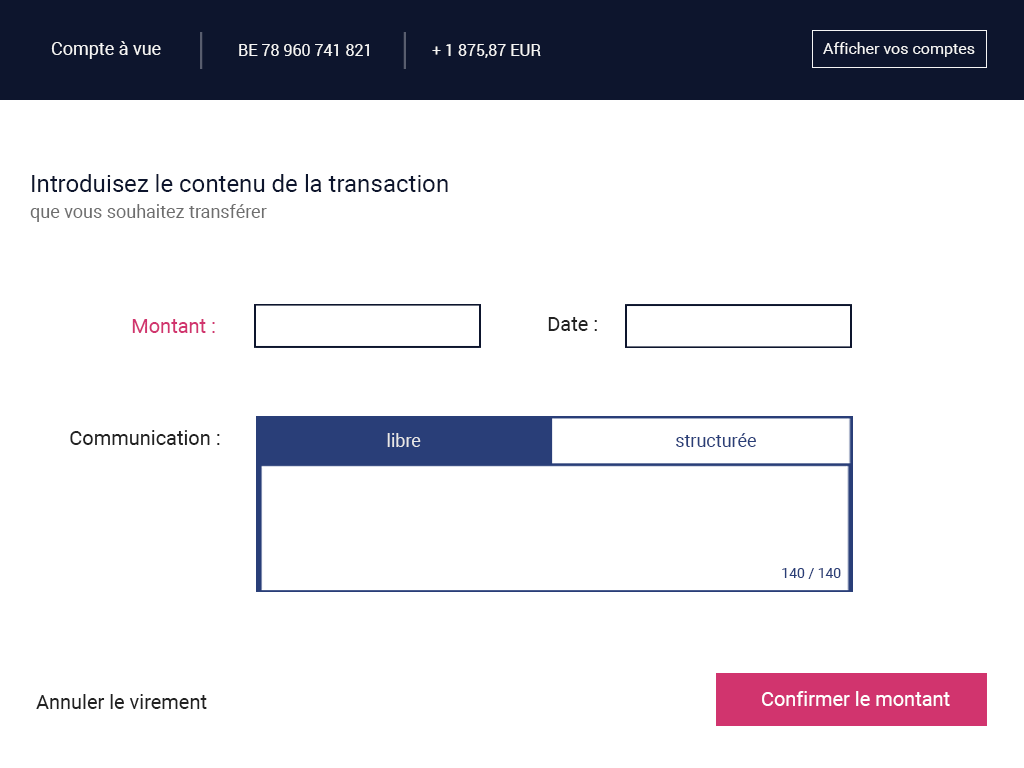
<style>
.page{position:relative;width:1024px;height:768px;background:#ffffff}
.page>*{position:absolute;margin:0}
.t1{font:18px "Roboto-Regular";color:#f5f5f5}
.t2{font:16px "Roboto-Regular";color:#f5f5f5}
.t3{font:24px "Roboto-Regular";color:#0d152d}
.t4{font:18px "Roboto-Regular";color:#6e6e6e}
.t5{font:20px "Roboto-Regular";color:#222222}
.t6{font:20px "Roboto-Regular";color:#d1346e}
.t7{font:18px "Roboto-Regular";color:#e8e8e8}
.t8{font:18px "Roboto-Regular";color:#293e78}
.t9{font:14px "Roboto-Regular";color:#293e78}
.t10{font:20px "Roboto-Regular";color:#ffffff}
</style>
<div class="page">
<p class="t1" style="left:51px;top:41px;width:110px;height:18px">Compte à vue</p>
<p class="t2" style="left:239px;top:44px;width:130px;height:12px">BE 78 960 741 821</p>
<p class="t2" style="left:432px;top:44px;width:109px;height:14px">+ 1 875,87 EUR</p>
<p class="t2" style="left:823px;top:42px;width:152px;height:15px">Afficher vos comptes</p>
<p class="t3" style="left:32px;top:174px;width:416px;height:18px">Introduisez le contenu de la transaction</p>
<p class="t4" style="left:30px;top:204px;width:237px;height:18px">que vous souhaitez transférer</p>
<p class="t5" style="left:548px;top:317px;width:49px;height:14px">Date :</p>
<p class="t6" style="left:132px;top:319px;width:83px;height:14px">Montant :</p>
<p class="t5" style="left:70px;top:430px;width:150px;height:15px">Communication :</p>
<p class="t7" style="left:387px;top:433px;width:34px;height:14px">libre</p>
<p class="t8" style="left:676px;top:433px;width:80px;height:14px">structurée</p>
<p class="t9" style="left:782px;top:568px;width:59px;height:11px">140 / 140</p>
<p class="t5" style="left:36px;top:694px;width:171px;height:15px">Annuler le virement</p>
<p class="t10" style="left:762px;top:691px;width:188px;height:15px">Confirmer le montant</p>
</div>
